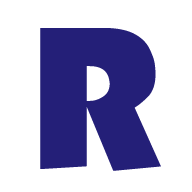
<style>
.page{position:relative;width:192px;height:192px;background:#ffffff}
.page>*{position:absolute;margin:0}
.t1{font:200px "Boulder-Regular";color:#241f78}
</style>
<div class="page">
<p class="t1" style="left:40px;top:28px;width:121px;height:143px">R</p>
</div>
